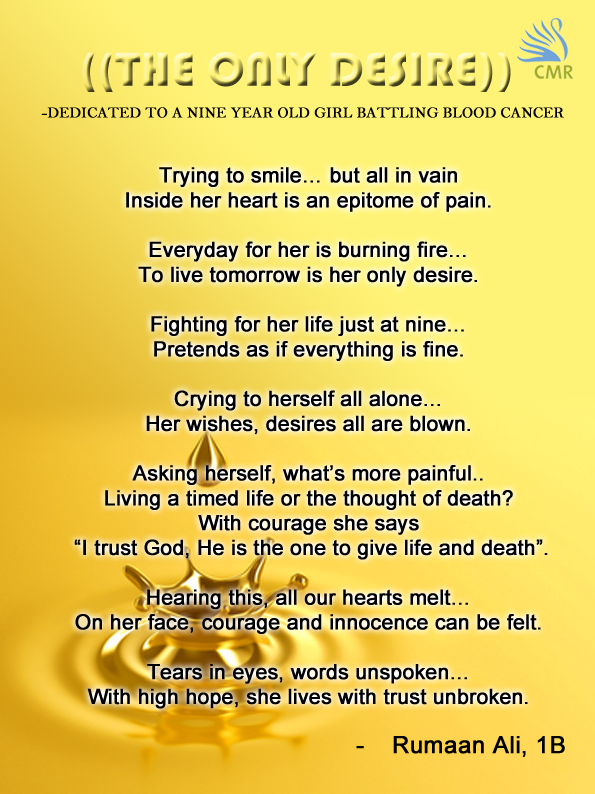
<style>
.page{position:relative;width:595px;height:794px}
.page>*{position:absolute;margin:0}
.t1{font:49.4px "Bauhaus93"}
.t2{font:15px "BellMT";color:#000000;font-weight:bold}
.t3{font:20.7px "ArialMT";color:#000000;font-weight:bold}
.t4{font:23.7px "ArialMT";color:#000000;font-weight:bold}
</style>
<div class="page">
<p class="t1" style="left:82px;top:52px;width:429px;height:40px">((THE ONLY DESIRE))</p>
<p class="t2" style="left:41px;top:107px;width:523px;height:11px">-DEDICATED TO A NINE YEAR OLD GIRL BATTLING BLOOD CANCER</p>
<p class="t3" style="left:74px;top:167px;width:474px;height:542px;text-align:center">Trying to smile… but all in vain<br>Inside her heart is an epitome of pain.<br><br>Everyday for her is burning fire…<br>To live tomorrow is her only desire.<br><br>Fighting for her life just at nine…<br>Pretends as if everything is fine.<br><br>Crying to herself all alone…<br>Her wishes, desires all are blown.<br><br>Asking herself, what’s more painful..<br>Living a timed life or the thought of death?<br>With courage she says<br> “I trust God, He is the one to give life and death”.<br><br>Hearing this, all our hearts melt…<br>On her face, courage and innocence can be felt.<br><br>Tears in eyes, words unspoken…<br>With high hope, she lives with trust unbroken.</p>
<p class="t4" style="left:356px;top:736px;width:209px;height:21px">- Rumaan Ali, 1B</p>
</div>
